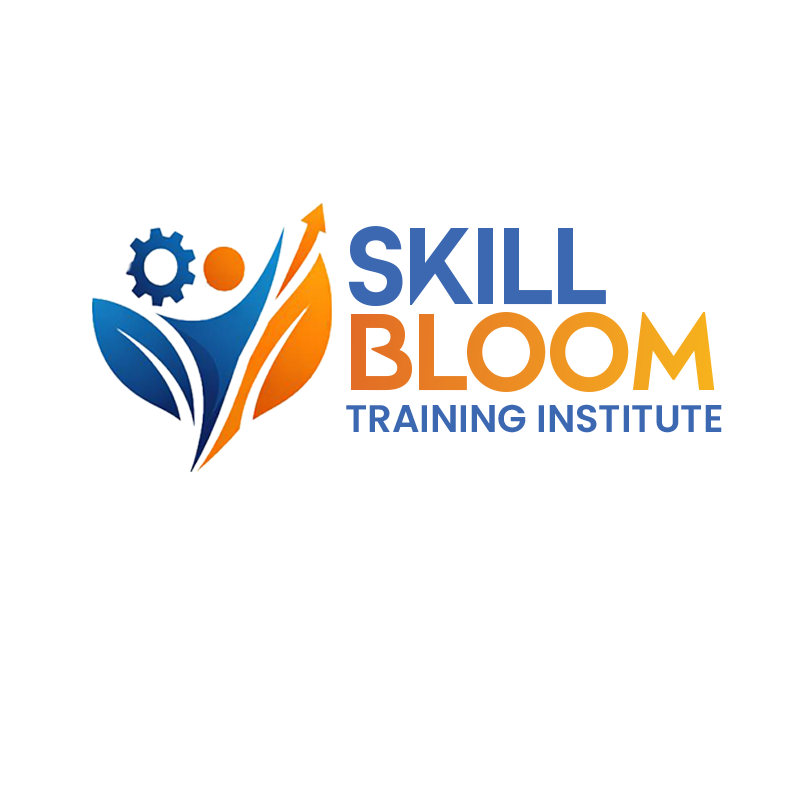
<style>
.page{position:relative;width:800px;height:800px;background:#ffffff}
.page>*{position:absolute;margin:0}
.t1{font:108.8px "Agile-Regular";color:#3c68b2}
.t2{font:108.8px "Agile-Regular"}
.t3{font:38.5px "Poppins-SemiBold";color:#3c68b2}
</style>
<div class="page">
<p class="t1" style="left:348px;top:226px;width:258px;height:80px">SKILL</p>
<p class="t2" style="left:351px;top:312px;width:364px;height:80px">BLOOM</p>
<p class="t3" style="left:346px;top:404px;width:376px;height:29px">TRAINING INSTITUTE</p>
</div>
